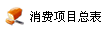
<style>
.page{position:relative;width:107px;height:32px;background:#ffffff}
.page>*{position:absolute;margin:0}
.t1{font:12px "SimSun";color:#000000}
</style>
<div class="page">
<p class="t1" style="left:30px;top:11px;width:71px;height:11px">消费项目总表</p>
</div>
